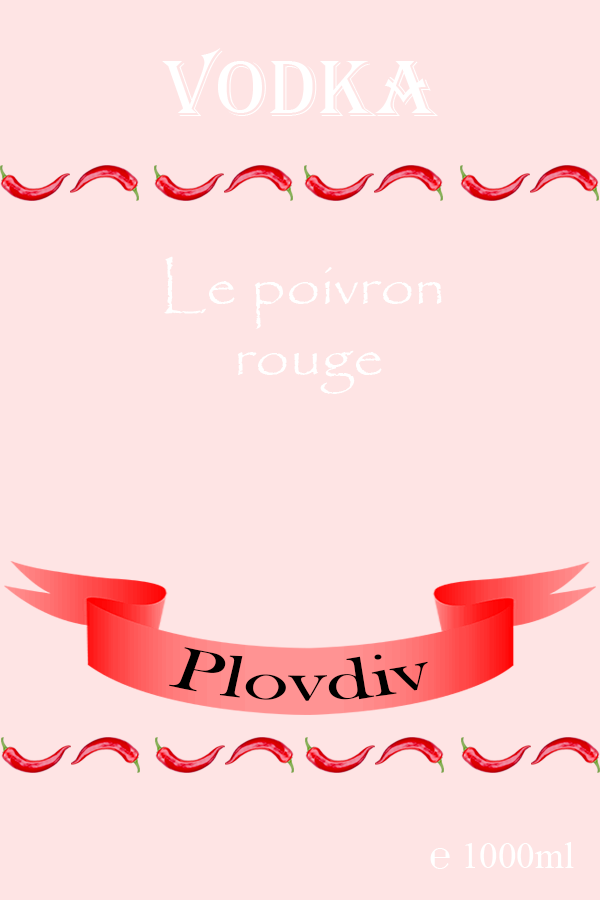
<style>
.page{position:relative;width:600px;height:900px;background:#fee4e4}
.page>*{position:absolute;margin:0}
.t1{font:83.3px "Algerian";color:#ffffff}
.t2{font:59px "Papyrus-Regular";color:#ffffff;scale:1.04 1}
.t3{font:60.2px "BaskOldFace";color:#000000;scale:1.31 1}
.t4{font:36.9px "TimesNewRomanPSMT";color:#ffffff}
</style>
<div class="page">
<p class="t1" style="left:162px;top:48px;width:276px;height:68px">vodka</p>
<p class="t2" style="left:164px;top:256px;width:278px;height:138px;text-align:center">Le poivron <br>rouge</p>
<p class="t3" style="left:168px;top:647px;width:260px;height:54px">Plovdiv</p>
<p class="t4" style="left:430px;top:842px;width:144px;height:27px">℮ 1000ml</p>
</div>
